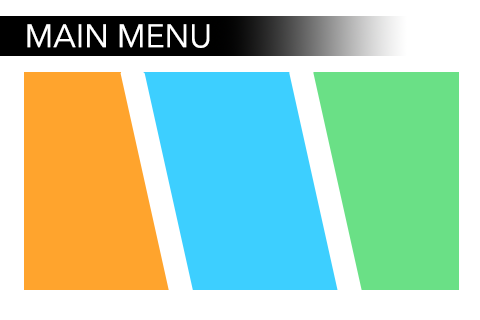
<style>
.page{position:relative;width:480px;height:320px;background:#ffffff}
.page>*{position:absolute;margin:0}
.t1{font:32.3px "AvenirNext-Regular";color:#ffffff}
</style>
<div class="page">
<p class="t1" style="left:27px;top:24px;width:183px;height:24px">MAIN MENU</p>
</div>
